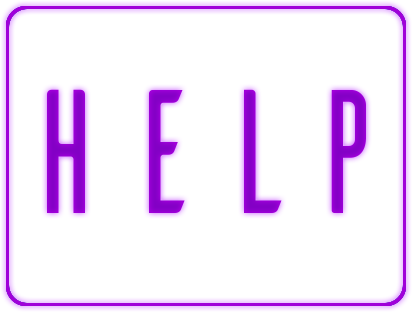
<style>
.page{position:relative;width:412px;height:312px;background:#ffffff}
.page>*{position:absolute;margin:0}
.t1{font:176px "Ailerons-Regular";color:#8300c5;scale:0.91 1}
</style>
<div class="page">
<p class="t1" style="left:47px;top:89px;width:319px;height:124px">help</p>
</div>
